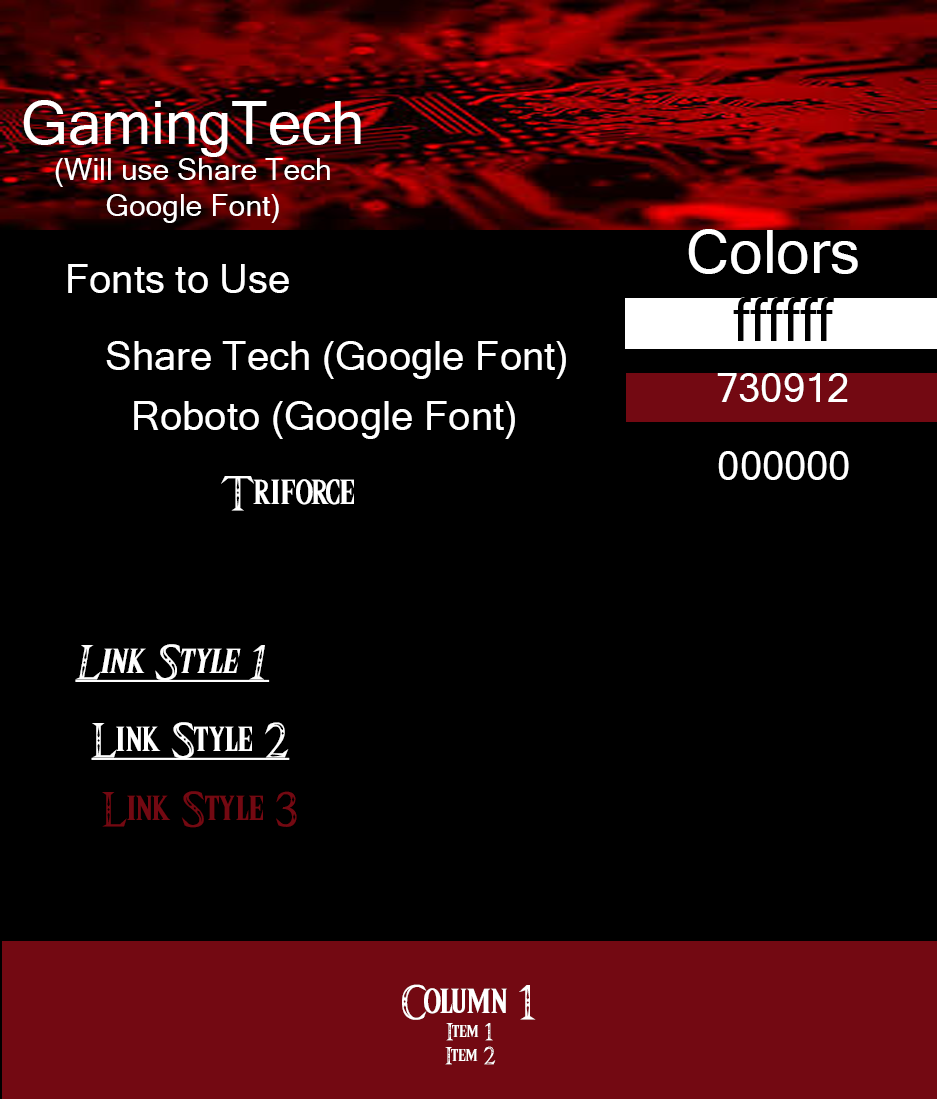
<style>
.page{position:relative;width:937px;height:1099px;background:#000000}
.page>*{position:absolute;margin:0}
.t1{font:30px "MicrosoftSansSerif";color:#ffffff}
.t2{font:60px "MicrosoftSansSerif";color:#ffffff}
.t3{font:40px "MicrosoftSansSerif";color:#ffffff}
.t4{font:60px "MicrosoftSansSerif";color:#000000}
.t5{font:40px "Triforce";color:#ffffff}
.t6{font:40px "Triforce";color:#ffffff;font-style:italic;text-decoration:underline}
.t7{font:40px "Triforce";color:#ffffff;text-decoration:underline}
.t8{font:40px "Triforce";color:#730912}
.t9{font:20px "Triforce";color:#ffffff}
.t10{font:40px "Triforce";color:#000000}
</style>
<div class="page">
<p class="t1" style="left:23px;top:100px;width:338px;height:123px;text-align:center"><span class="t2">GamingTech<br></span>(Will use Share Tech Google Font)</p>
<p class="t2" style="left:688px;top:229px;width:170px;height:45px">Colors</p>
<p class="t3" style="left:68px;top:264px;width:221px;height:29px">Fonts to Use</p>
<p class="t4" style="left:732px;top:297px;width:101px;height:44px">ffffff</p>
<p class="t4" style="left:733px;top:297px;width:101px;height:44px">ffffff</p>
<p class="t3" style="left:106px;top:341px;width:460px;height:38px">Share Tech (Google Font)</p>
<p class="t3" style="left:717px;top:373px;width:131px;height:29px">730912</p>
<p class="t3" style="left:134px;top:401px;width:381px;height:38px">Roboto (Google Font)</p>
<p class="t3" style="left:718px;top:451px;width:131px;height:29px">000000</p>
<p class="t5" style="left:221px;top:476px;width:133px;height:35px">Triforce</p>
<p class="t6" style="left:75px;top:644px;width:195px;height:38px">Link Style 1</p>
<p class="t7" style="left:91px;top:722px;width:199px;height:38px">Link Style 2</p>
<p class="t8" style="left:102px;top:791px;width:195px;height:37px">Link Style 3</p>
<p class="t9" style="left:402px;top:984px;width:134px;height:81px;text-align:center"><span class="t10"><br></span><span class="t5">Column 1<br></span>Item 1<br>Item 2</p>
</div>
